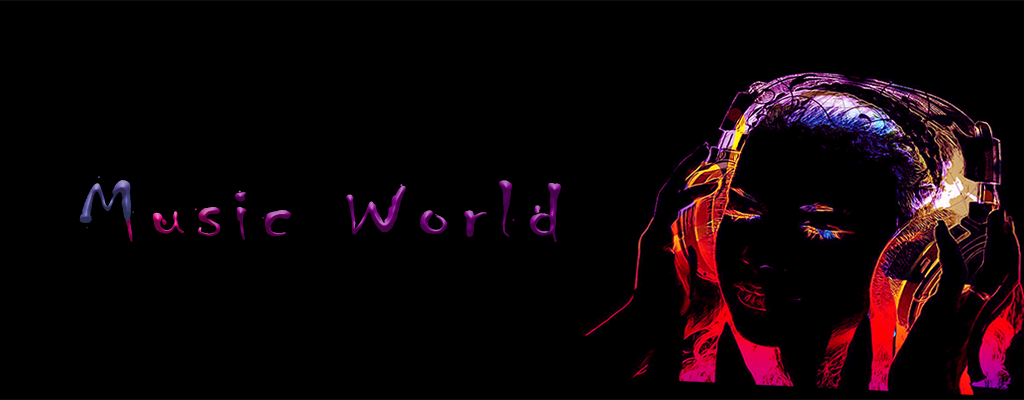
<style>
.page{position:relative;width:1024px;height:400px;background:#000000}
.page>*{position:absolute;margin:0}
.t1{font:84px "Chiller-Regular";letter-spacing:0.1em;scale:1.25 1}
</style>
<div class="page">
<p class="t1" style="left:79px;top:176px;width:482px;height:67px">Music World</p>
</div>
